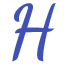
<style>
.page{position:relative;width:64px;height:64px;background:#ffffff}
.page>*{position:absolute;margin:0}
.t1{font:72px "DancingScript-Bold";color:#3f51b5}
</style>
<div class="page">
<p class="t1" style="left:12px;top:3px;width:44px;height:59px">H</p>
</div>
